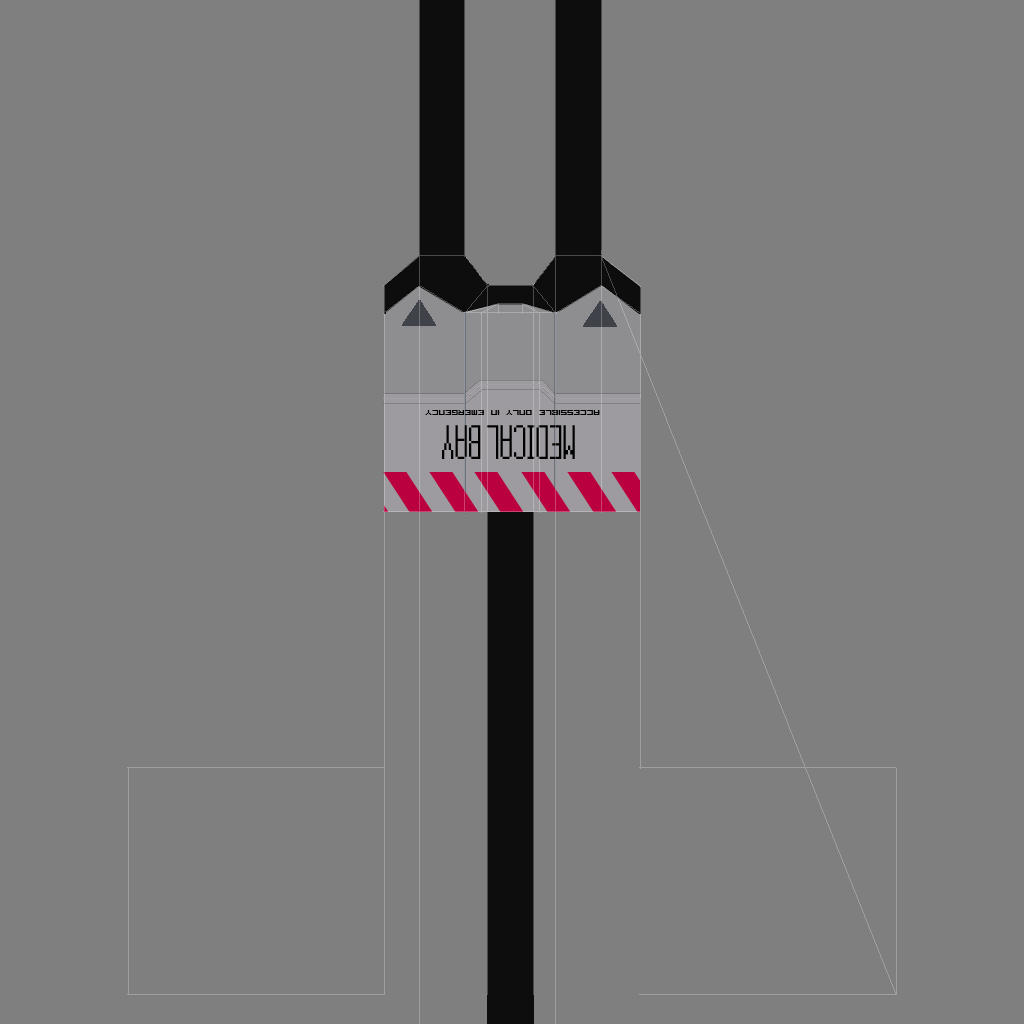
<style>
.page{position:relative;width:1024px;height:1024px;background:#7f7f7f}
.page>*{position:absolute;margin:0}
.t1{font:14px "VisitorTT2BRK";color:#000000}
.t2{font:36px "15x5";color:#000000}
</style>
<div class="page">
<p class="t1" style="left:425px;top:410px;width:175px;height:5px;rotate:180deg">Accessible only in emergency</p>
<p class="t2" style="left:442px;top:425px;width:133px;height:34px;rotate:180deg">MEDICAL BAY</p>
</div>
